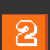
<style>
.page{position:relative;width:50px;height:50px;background:#f97015}
.page>*{position:absolute;margin:0}
.t1{font:25.8px "1UP!";color:#ffffff}
</style>
<div class="page">
<p class="t1" style="left:15px;top:20px;width:23px;height:27px">2</p>
</div>
